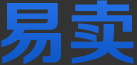
<style>
.page{position:relative;width:137px;height:65px;background:#333333}
.page>*{position:absolute;margin:0}
.t1{font:70px "FZZCHJW--GB1-0";color:#1862d5}
</style>
<div class="page">
<p class="t1" style="left:1px;top:0px;width:133px;height:65px">易卖</p>
</div>
